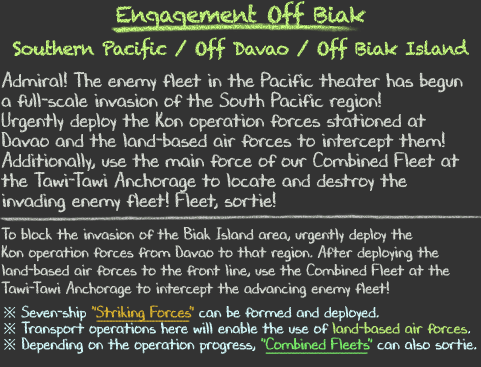
<style>
.page{position:relative;width:481px;height:367px;background:#333333}
.page>*{position:absolute;margin:0}
.t1{font:18px/36px "Chalkduster";letter-spacing:-0.04em;color:#bdee78}
.t2{font:22px/36px "Chalkduster";letter-spacing:-0.04em;color:#bdee78}
.t3{font:20px/20px "DJBChalkItUp";color:#d9ded6}
.t4{font:16px/18px "DJBChalkItUp";color:#d9ded6}
.t5{font:16px/24px "DJBChalkItUp";color:#d9ded6}
.t6{font:16px/16px "TimesNewRomanPSMT";color:#d7feff}
.t7{font:16px/16px "DJBChalkItUp";color:#d7feff}
.t8{font:16px/16px "DJBChalkItUp";color:#dfb731}
.t9{font:16px/16px "DJBChalkItUp";color:#dfb731;text-decoration:underline}
.t10{font:16px/16px "DJBChalkItUp";color:#bdef78}
.t11{font:16px/20px "DJBChalkItUp";color:#d7feff}
.t12{font:16px/16px "DJBChalkItUp";color:#7bf26b}
.t13{font:16px/16px "DJBChalkItUp";color:#7bf26b;text-decoration:underline}
</style>
<div class="page">
<p class="t1" style="left:12px;top:1px;width:457px;height:59px;text-align:center"><span class="t2">Engagement Off Biak<br></span>Southern Pacific / Off Davao / Off Biak Island</p>
<p class="t3" style="left:0px;top:71px;width:477px;height:283px">Admiral! The enemy fleet in the Pacific theater has begun<br>a full-scale invasion of the South Pacific region!<br>Urgently deploy the Kon operation forces stationed at<br>Davao and the land-based air forces to intercept them!<br>Additionally, use the main force of our Combined Fleet at<br>the Tawi-Tawi Anchorage to locate and destroy the<br>invading enemy fleet! Fleet, sortie!<br><br><span class="t4">To block the invasion of the Biak Island area, urgently deploy the<br>Kon operation forces from Davao to that region. After deploying the<br>land-based air forces to the front line, use the Combined Fleet at the<br>Tawi-Tawi Anchorage to intercept the advancing enemy fleet</span><span class="t5">!<br></span><span class="t6">※ </span><span class="t7">Seven-ship </span><span class="t8">"</span><span class="t9">Striking Forces</span><span class="t8">"</span><span class="t7"> can be formed and deployed.<br></span><span class="t6">※ </span><span class="t7">Transport operations here will enable the use of </span><span class="t10">land-based air forces</span><span class="t7">.<br></span><span class="t6">※ </span><span class="t11">Depending on the operation progress, </span><span class="t12">"</span><span class="t13">Combined Fleets</span><span class="t12">"</span><span class="t11"> can also sortie.</span></p>
</div>
